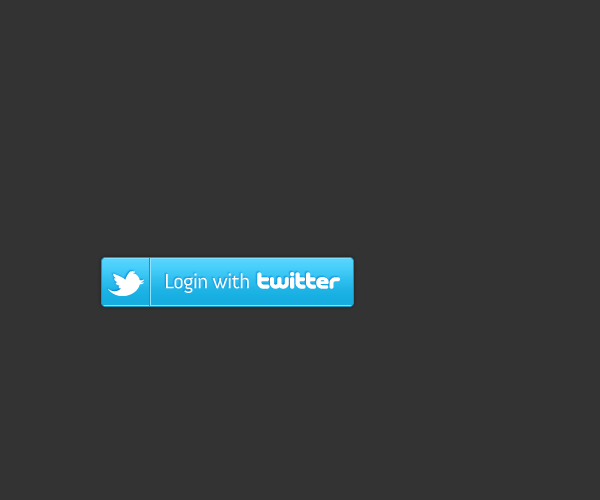
<style>
.page{position:relative;width:600px;height:500px;background:#333333}
.page>*{position:absolute;margin:0}
.t1{font:21px "Anivers-Regular";letter-spacing:-0.025em;color:#ffffff}
</style>
<div class="page">
<p class="t1" style="left:166px;top:273px;width:83px;height:20px">Login with</p>
</div>
